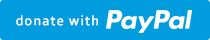
<style>
.page{position:relative;width:210px;height:40px;background:#009cde}
.page>*{position:absolute;margin:0}
.t1{font:14.1px "Corbel-Bold";letter-spacing:0.07em;color:#ffffff}
</style>
<div class="page">
<p class="t1" style="left:16px;top:15px;width:82px;height:11px">donate with</p>
</div>
